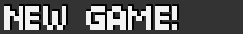
<style>
.page{position:relative;width:243px;height:34px;background:#333333}
.page>*{position:absolute;margin:0}
.t1{font:36px "04b03";letter-spacing:-0.05em;color:#f3f3f3;font-weight:bold}
</style>
<div class="page">
<p class="t1" style="left:4px;top:6px;width:173px;height:24px">NEW GAME!</p>
</div>
